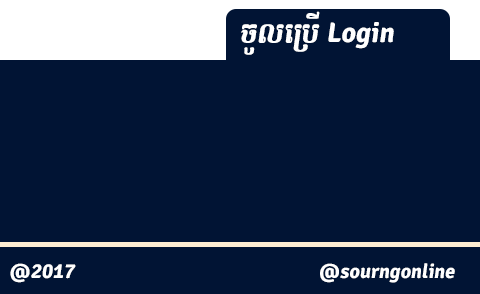
<style>
.page{position:relative;width:480px;height:294px;background:#011434}
.page>*{position:absolute;margin:0}
.t1{font:25.8px "Romnea-Italic";color:#ffffff}
.t2{font:26.4px "Romnea-Italic";color:#ffffff}
.t3{font:18.9px "Romnea-Italic";color:#ffffff}
</style>
<div class="page">
<p class="t1" style="left:241px;top:11px;width:79px;height:44px;text-align:center">ចូល​េ​ប្រី​</p>
<p class="t2" style="left:328px;top:22px;width:66px;height:27px">Login</p>
<p class="t3" style="left:10px;top:263px;width:66px;height:20px">@2017</p>
<p class="t3" style="left:320px;top:263px;width:135px;height:20px">@sourngonline</p>
</div>
